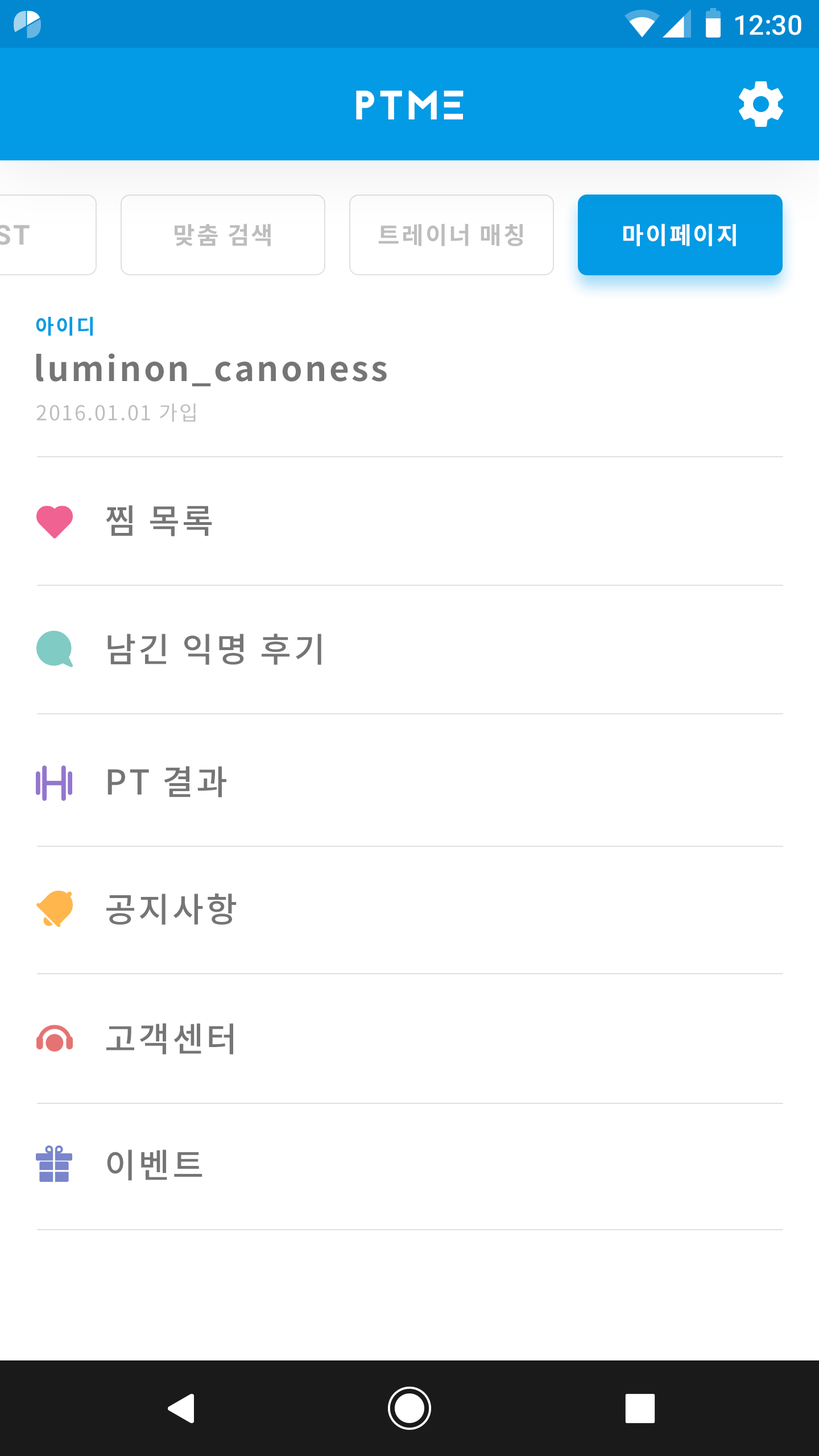
<style>
.page{position:relative;width:819px;height:1456px;background:#ffffff}
.page>*{position:absolute;margin:0}
.t1{font:27.3px "Roboto-Medium";color:#ffffff}
.t2{font:40.9px "Jaapokkisubtract-Regular";letter-spacing:0.05em;color:#ffffff}
.t3{font:23.9px "NotoSansCJKkr-Bold";letter-spacing:0.072em;color:#bdbdbd}
.t4{font:23.9px "NotoSansCJKkr-Bold";letter-spacing:0.072em;color:#ffffff}
.t5{font:20.5px "NotoSansCJKkr-Bold";letter-spacing:0.072em;color:#039be5}
.t6{font:34.1px "NotoSansCJKkr-Bold";letter-spacing:0.072em;color:#757575}
.t7{font:20.5px "NotoSansCJKkr-Regular";letter-spacing:0.072em;color:#bdbdbd}
.t8{font:34.1px "NotoSansCJKkr-Medium";letter-spacing:0.072em;color:#757575}
</style>
<div class="page">
<p class="t1" style="left:735px;top:15px;width:66px;height:20px">12:30</p>
<p class="t2" style="left:356px;top:90px;width:108px;height:29px">PTME</p>
<p class="t3" style="left:175px;top:224px;width:96px;height:22px">맞춤 검색</p>
<p class="t3" style="left:378px;top:224px;width:145px;height:22px">트레이너 매칭</p>
<p class="t4" style="left:623px;top:224px;width:113px;height:22px">마이페이지</p>
<p class="t5" style="left:36px;top:317px;width:57px;height:19px">아이디</p>
<p class="t6" style="left:36px;top:353px;width:351px;height:34px">luminon_canoness</p>
<p class="t7" style="left:36px;top:403px;width:160px;height:19px">2016.01.01 가입</p>
<p class="t8" style="left:106px;top:505px;width:106px;height:31px">찜 목록</p>
<p class="t8" style="left:107px;top:634px;width:214px;height:31px">남긴 익명 후기</p>
<p class="t8" style="left:107px;top:766px;width:119px;height:31px">PT 결과</p>
<p class="t8" style="left:106px;top:893px;width:131px;height:32px">공지사항</p>
<p class="t8" style="left:106px;top:1023px;width:127px;height:31px">고객센터</p>
<p class="t8" style="left:107px;top:1149px;width:95px;height:32px">이벤트</p>
</div>
